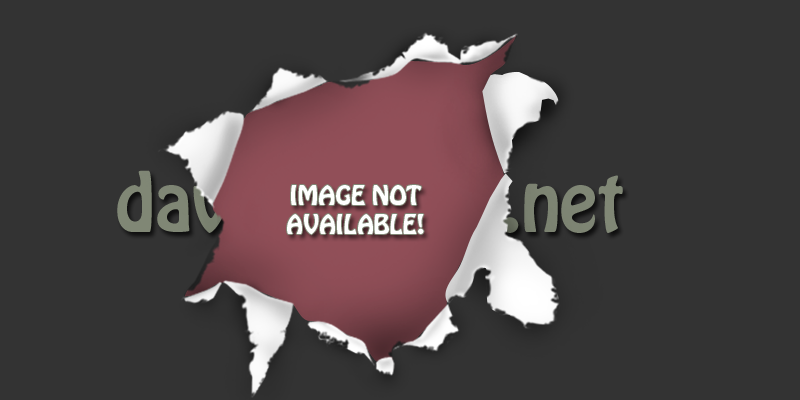
<style>
.page{position:relative;width:800px;height:400px;background:#333333}
.page>*{position:absolute;margin:0}
.t1{font:24px "HoboStd";color:#fefffe}
</style>
<div class="page">
<p class="t1" style="left:287px;top:185px;width:137px;height:50px;text-align:center">IMAGE NOT AVAILABLE!</p>
</div>
